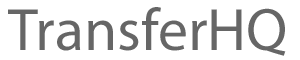
<style>
.page{position:relative;width:300px;height:60px;background:#ffffff}
.page>*{position:absolute;margin:0}
.t1{font:60px "MyriadPro-Regular";color:#666666}
</style>
<div class="page">
<p class="t1" style="left:8px;top:7px;width:278px;height:49px">TransferHQ</p>
<p class="t1" style="left:9px;top:8px;width:278px;height:49px">TransferHQ</p>
</div>
